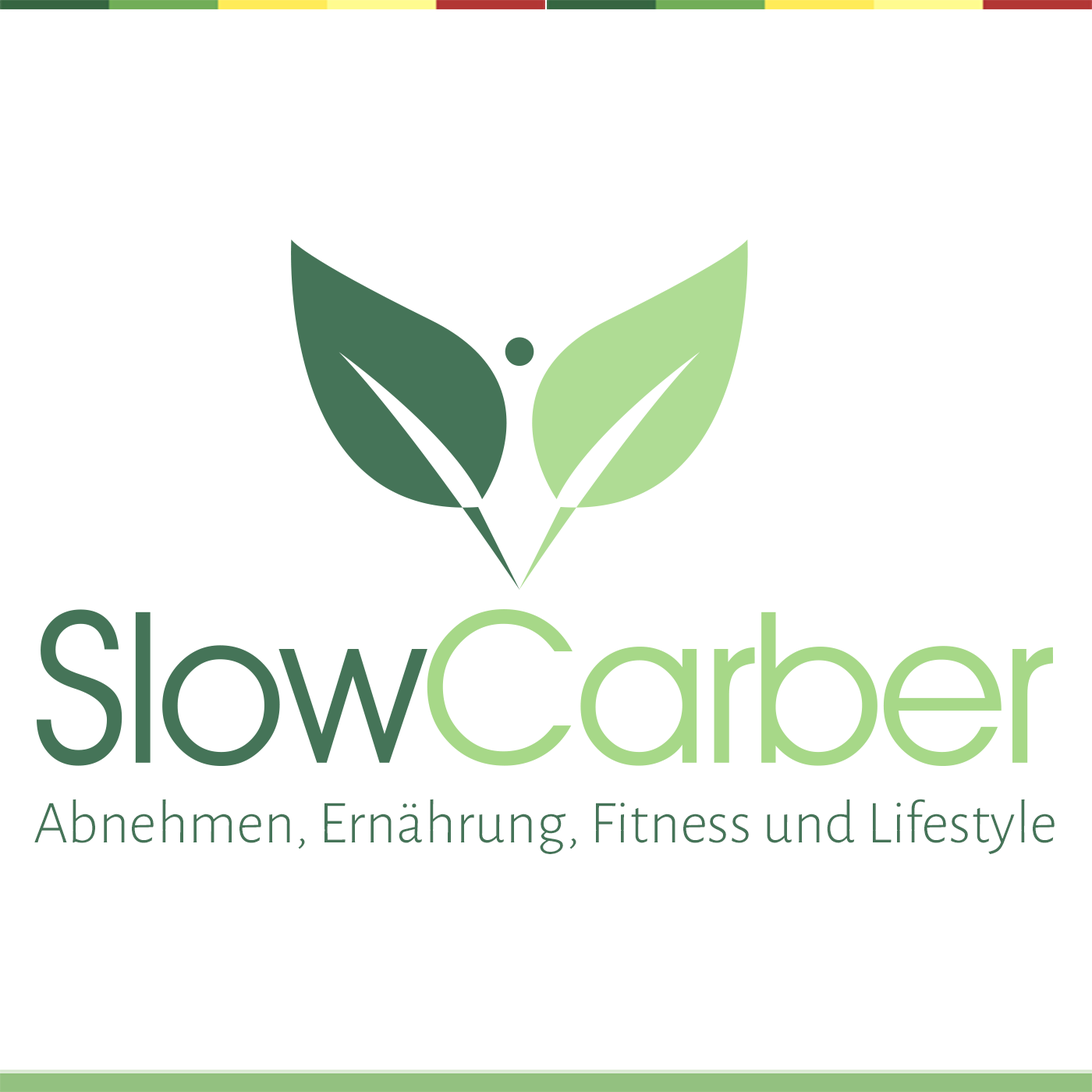
<style>
.page{position:relative;width:1092px;height:1092px;background:#ffffff}
.page>*{position:absolute;margin:0}
.t1{font:61.3px "AlegreyaSans-Light";color:#457458}
</style>
<div class="page">
<p class="t1" style="left:34px;top:799px;width:1021px;height:55px">Abnehmen, Ernährung, Fitness und Lifestyle</p>
</div>
